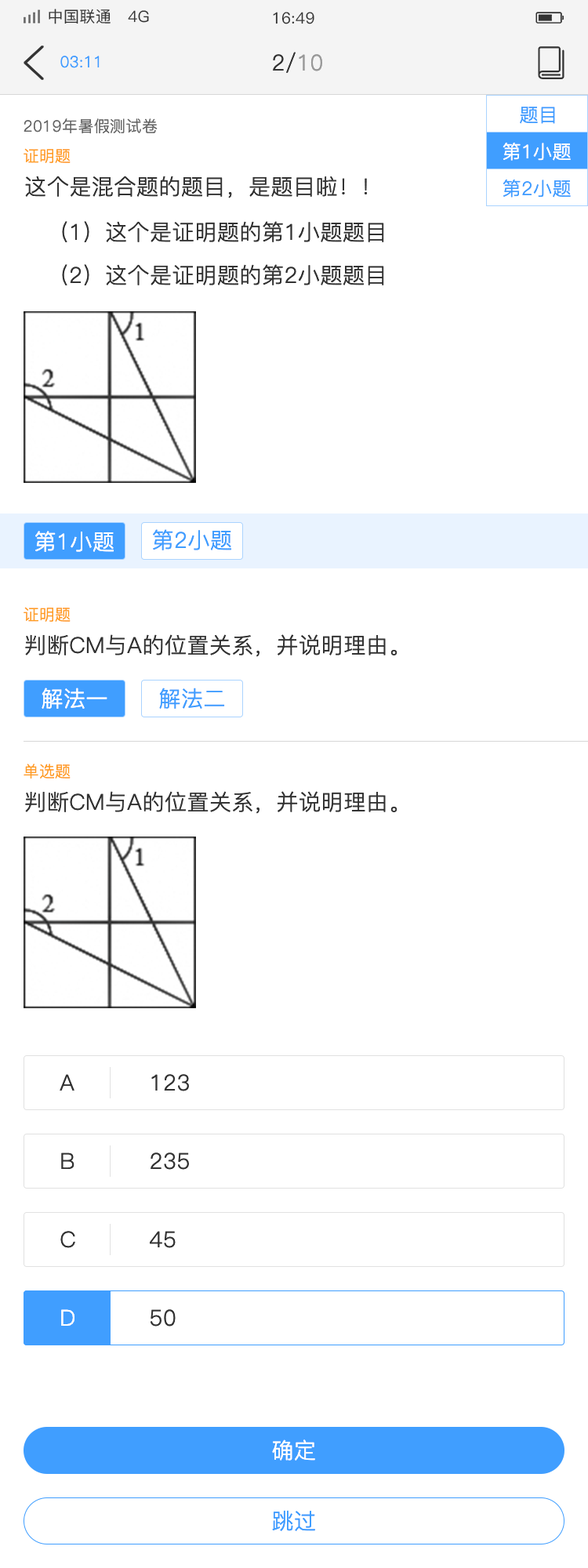
<style>
.page{position:relative;width:588px;height:1568px;background:#ffffff}
.page>*{position:absolute;margin:0}
.t1{font:15.7px "PingFang-SC-Medium";letter-spacing:0.02em;color:#333333}
.t2{font:22px "PingFang-SC-Regular";letter-spacing:0.02em;color:#333333}
.t3{font:22px "PingFang-SC-Regular";letter-spacing:0.02em;color:#999999}
.t4{font:15.7px "PingFang-SC-Regular";letter-spacing:0.02em;color:#409eff}
.t5{font:18.8px "PingFang-SC-Regular";letter-spacing:0.02em;color:#409eff}
.t6{font:15.7px "PingFang-SC-Regular";letter-spacing:0.02em;color:#666666}
.t7{font:15.7px "PingFang-SC-Regular";letter-spacing:0.02em;color:#ff9e21}
.t8{font:18.8px "PingFang-SC-Regular";letter-spacing:0.02em;color:#ffffff}
.t9{font:22px "PingFang-SC-Regular";letter-spacing:0.02em;color:#ffffff}
.t10{font:22px "PingFang-SC-Regular";letter-spacing:0.02em;color:#409eff}
</style>
<div class="page">
<p class="t1" style="left:49px;top:9px;width:100px;height:15px">中国联通   4G</p>
<p class="t1" style="left:273px;top:12px;width:41px;height:12px">16:49</p>
<p class="t2" style="left:273px;top:52px;width:49px;height:21px">2/<span class="t3">10</span></p>
<p class="t4" style="left:60px;top:56px;width:40px;height:12px">03:11</p>
<p class="t5" style="left:520px;top:107px;width:35px;height:17px">题目</p>
<p class="t6" style="left:24px;top:118px;width:134px;height:16px">2019年暑假测试卷</p>
<p class="t7" style="left:24px;top:148px;width:47px;height:15px">证明题</p>
<p class="t8" style="left:503px;top:142px;width:68px;height:19px">第1小题</p>
<p class="t2" style="left:25px;top:176px;width:343px;height:22px">这个是混合题的题目，是题目啦！！</p>
<p class="t5" style="left:503px;top:179px;width:68px;height:19px">第2小题</p>
<p class="t2" style="left:62px;top:221px;width:322px;height:21px">（1）这个是证明题的第1小题题目</p>
<p class="t2" style="left:62px;top:264px;width:322px;height:21px">（2）这个是证明题的第2小题题目</p>
<p class="t9" style="left:35px;top:531px;width:79px;height:21px">第1小题</p>
<p class="t10" style="left:153px;top:529px;width:78px;height:21px">第2小题</p>
<p class="t7" style="left:24px;top:607px;width:47px;height:15px">证明题</p>
<p class="t2" style="left:25px;top:634px;width:372px;height:23px">判断CM与A的位置关系，并说明理由。</p>
<p class="t9" style="left:42px;top:688px;width:65px;height:21px">解法一</p>
<p class="t10" style="left:159px;top:688px;width:66px;height:21px">解法二</p>
<p class="t7" style="left:24px;top:764px;width:47px;height:15px">单选题</p>
<p class="t2" style="left:25px;top:791px;width:372px;height:23px">判断CM与A的位置关系，并说明理由。</p>
<p class="t2" style="left:60px;top:1074px;width:14px;height:17px">A</p>
<p class="t2" style="left:151px;top:1074px;width:38px;height:17px">123</p>
<p class="t2" style="left:61px;top:1152px;width:13px;height:17px">B</p>
<p class="t2" style="left:151px;top:1152px;width:38px;height:18px">235</p>
<p class="t2" style="left:60px;top:1231px;width:15px;height:17px">C</p>
<p class="t2" style="left:150px;top:1231px;width:26px;height:17px">45</p>
<p class="t9" style="left:61px;top:1309px;width:13px;height:17px">D</p>
<p class="t2" style="left:151px;top:1309px;width:25px;height:18px">50</p>
<p class="t9" style="left:272px;top:1439px;width:43px;height:22px">确定</p>
<p class="t10" style="left:272px;top:1510px;width:43px;height:21px">跳过</p>
</div>
